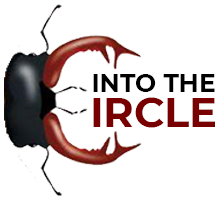
<style>
.page{position:relative;width:220px;height:200px;background:#ffffff}
.page>*{position:absolute;margin:0}
.t1{font:25px "Montserrat-Bold";color:#000000}
.t2{font:41.7px "Montserrat-Bold";color:#790000}
</style>
<div class="page">
<p class="t1" style="left:93px;top:74px;width:122px;height:18px">INTO THE</p>
<p class="t2" style="left:93px;top:97px;width:122px;height:31px">IRCLE</p>
</div>
